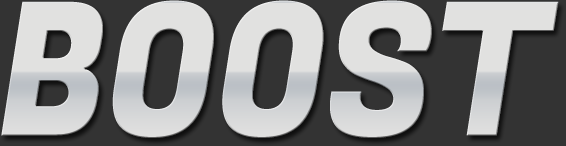
<style>
.page{position:relative;width:566px;height:146px;background:#333333}
.page>*{position:absolute;margin:0}
.t1{font:185.2px "FugazOne-Regular";color:#dfdfdf;scale:0.89 1}
</style>
<div class="page">
<p class="t1" style="left:1px;top:0px;width:558px;height:138px">BOOST</p>
</div>
